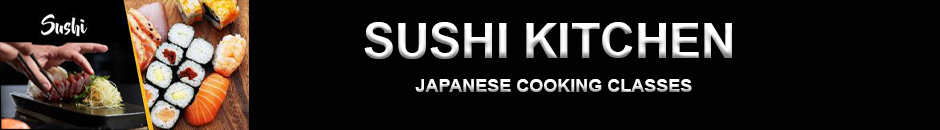
<style>
.page{position:relative;width:940px;height:130px;background:#020202}
.page>*{position:absolute;margin:0}
.t1{font:48px "Arial-BoldMT";color:#ffffff;text-transform:uppercase}
.t2{font:18px "Arial-BoldMT";text-transform:uppercase}
</style>
<div class="page">
<p class="t1" style="left:364px;top:22px;width:368px;height:37px">Sushi kitchen</p>
<p class="t2" style="left:415px;top:79px;width:277px;height:13px">Japanese Cooking classes</p>
</div>
